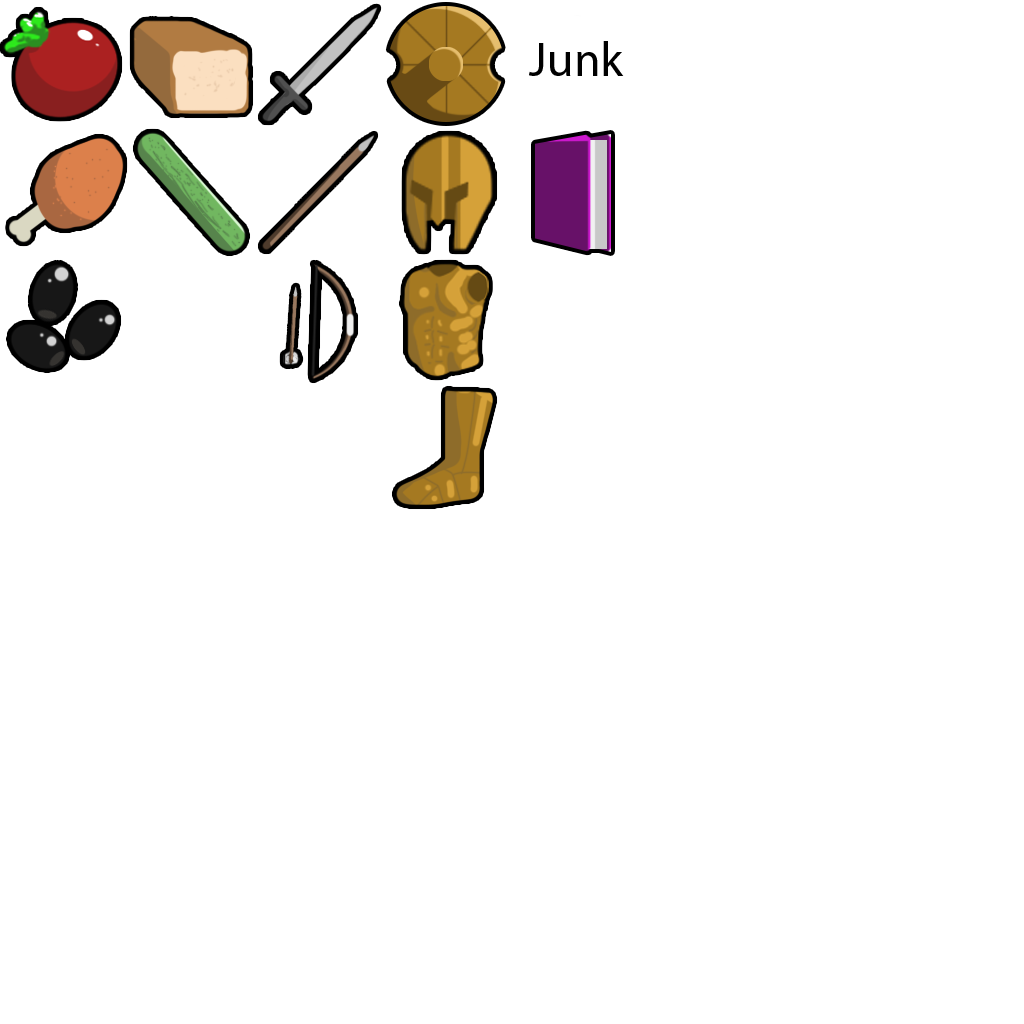
<style>
.page{position:relative;width:1024px;height:1024px;background:#ffffff}
.page>*{position:absolute;margin:0}
.t1{font:48px "MyriadPro-Regular";color:#000000}
</style>
<div class="page">
<p class="t1" style="left:529px;top:41px;width:95px;height:35px">Junk</p>
</div>
